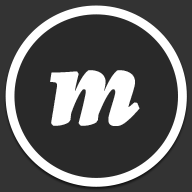
<style>
.page{position:relative;width:192px;height:192px;background:#292929}
.page>*{position:absolute;margin:0}
.t1{font:113px "Alegreya-BlackItalic";letter-spacing:-0.076em;color:#ffffff}
</style>
<div class="page">
<p class="t1" style="left:50px;top:70px;width:90px;height:56px">m</p>
</div>
